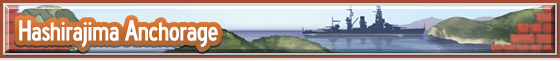
<style>
.page{position:relative;width:560px;height:61px}
.page>*{position:absolute;margin:0}
.t1{font:27px "HighwayGothicNarrow";letter-spacing:-0.04em;color:#ffffff}
.t2{font:30px "HighwayGothicNarrow";letter-spacing:-0.04em;color:#ffffff}
</style>
<div class="page">
<p class="t1" style="left:19px;top:20px;width:199px;height:28px"><span class="t2">H</span>ashirajima<span class="t2"> A</span>nchorage</p>
</div>
